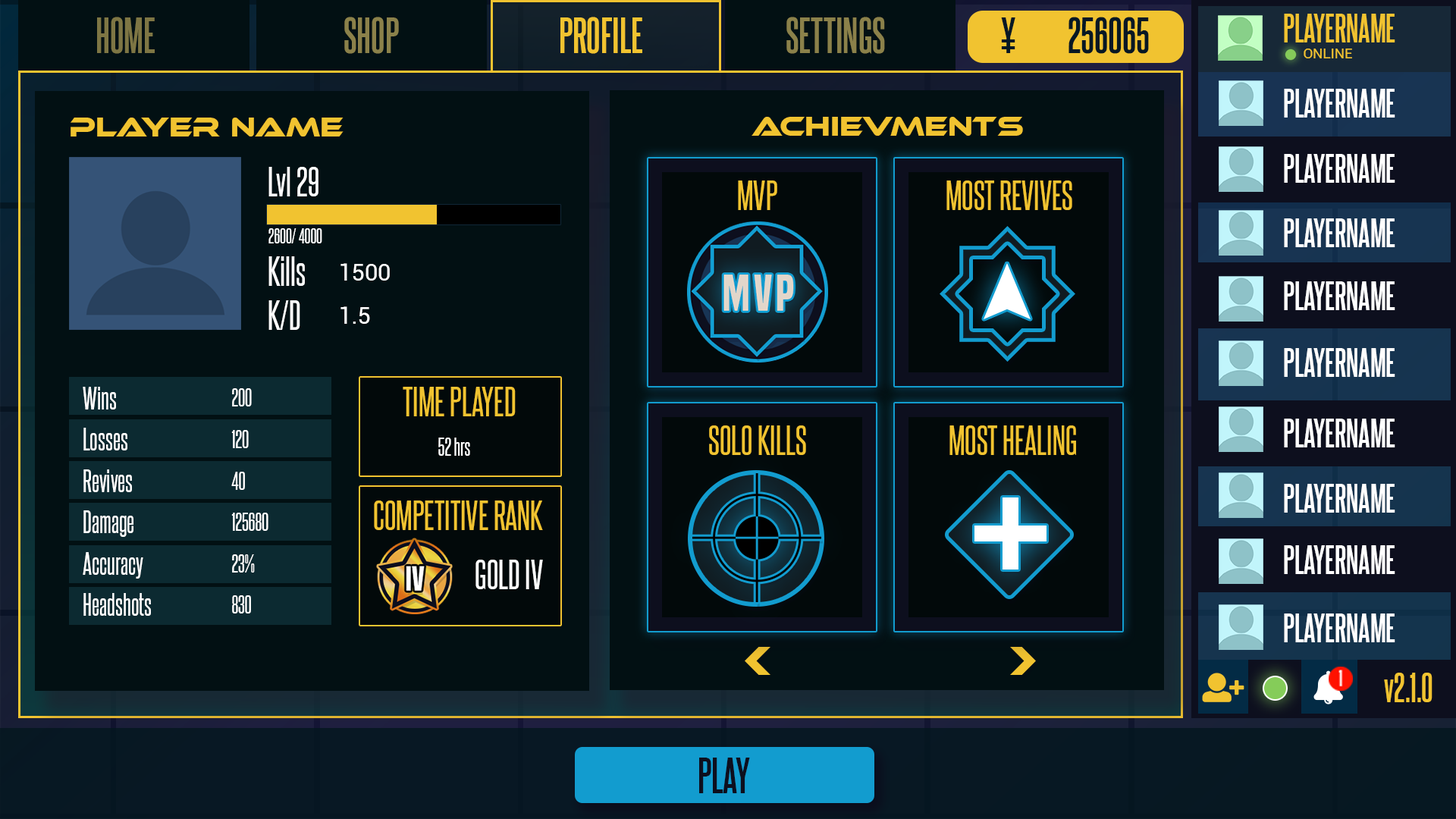
<style>
.page{position:relative;width:1456px;height:819px;background:#021013}
.page>*{position:absolute;margin:0}
.t1{font:43.2px "SteelfishRg-Bold";color:#7e7644}
.t2{font:43.2px "SteelfishRg-Bold";color:#8b814a}
.t3{font:43.2px "SteelfishRg-Bold";color:#f1c330}
.t4{font:43.2px "SteelfishRg-Bold";color:#071824}
.t5{font:34.5px "SteelfishRg-Bold";color:#f1c330}
.t6{font:14.1px "Roboto-Regular";color:#f1c330}
.t7{font:34.5px "SteelfishRg-Bold";color:#ffffff}
.t8{font:27.3px "EthnocentricRg-Regular";color:#f1c330}
.t9{font:36.4px "SteelfishRg-Regular";color:#ffffff}
.t10{font:36.4px "SteelfishRg-Regular";color:#f1c330}
.t11{font:18.2px "SteelfishRg-Regular";color:#ffffff}
.t12{font:23.2px "Roboto-Regular";color:#ffffff}
.t13{font:32.1px/41.4px "SteelfishRg-Regular"}
.t14{font:27.3px/41.4px "SteelfishRg-Regular";color:#ffffff}
.t15{font:21px/41.4px "SteelfishRg-Regular";color:#ffffff}
.t16{font:21px "SteelfishRg-Regular";color:#ffffff}
.t17{font:35.8px "SteelfishRg-Bold";color:#f1c330}
.t18{font:43.2px "SteelfishRg-Bold";color:#0d0f1e}
</style>
<div class="page">
<p class="t1" style="left:97px;top:17px;width:58px;height:37px">HOME</p>
<p class="t2" style="left:344px;top:17px;width:55px;height:37px">SHOP</p>
<p class="t3" style="left:560px;top:17px;width:82px;height:37px">PROFILE</p>
<p class="t2" style="left:786px;top:17px;width:99px;height:37px">SETTINGS</p>
<p class="t4" style="left:1001px;top:17px;width:14px;height:36px">¥</p>
<p class="t4" style="left:1068px;top:17px;width:81px;height:37px">256065</p>
<p class="t5" style="left:1284px;top:14px;width:111px;height:28px">PLAYERNAME</p>
<p class="t6" style="left:1304px;top:49px;width:48px;height:9px">ONLINE</p>
<p class="t7" style="left:1284px;top:89px;width:111px;height:29px">PLAYERNAME</p>
<p class="t8" style="left:71px;top:118px;width:273px;height:18px">Player Name</p>
<p class="t8" style="left:751px;top:117px;width:272px;height:19px">Achievments</p>
<p class="t7" style="left:1284px;top:154px;width:111px;height:29px">PLAYERNAME</p>
<p class="t9" style="left:268px;top:167px;width:50px;height:29px">Lvl 29</p>
<p class="t10" style="left:738px;top:180px;width:39px;height:30px">MVP</p>
<p class="t10" style="left:946px;top:180px;width:126px;height:30px">MOST REVIVES</p>
<p class="t7" style="left:1284px;top:218px;width:111px;height:29px">PLAYERNAME</p>
<p class="t11" style="left:268px;top:228px;width:54px;height:15px">2600/ 4000</p>
<p class="t9" style="left:268px;top:256px;width:37px;height:74px">Kills<br>K/D</p>
<p class="t12" style="left:340px;top:263px;width:50px;height:18px">1500</p>
<p class="t7" style="left:1284px;top:281px;width:111px;height:29px">PLAYERNAME</p>
<p class="t12" style="left:340px;top:306px;width:30px;height:18px">1.5</p>
<p class="t7" style="left:1284px;top:348px;width:111px;height:29px">PLAYERNAME</p>
<p class="t13" style="left:83px;top:383px;width:79px;height:233px">Wins<br>Losses<br>Revives<br>Damage <br>accuracy<br>headshots</p>
<p class="t14" style="left:83px;top:387px;width:68px;height:229px">Wins<br>Losses<br>Revives<br>Damage <br>Accuracy<br>Headshots</p>
<p class="t15" style="left:231px;top:388px;width:37px;height:225px">200<br>120<br>40<br>125680<br>23%<br>830</p>
<p class="t10" style="left:403px;top:387px;width:113px;height:29px">TIME PLAYED</p>
<p class="t10" style="left:709px;top:425px;width:97px;height:30px">SOLO KILLS</p>
<p class="t10" style="left:949px;top:425px;width:127px;height:30px">MOST HEALING</p>
<p class="t7" style="left:1284px;top:419px;width:111px;height:28px">PLAYERNAME</p>
<p class="t16" style="left:438px;top:438px;width:32px;height:18px">52 hrs</p>
<p class="t7" style="left:1284px;top:484px;width:111px;height:29px">PLAYERNAME</p>
<p class="t10" style="left:374px;top:500px;width:169px;height:30px">COMPETITIVE RANK</p>
<p class="t7" style="left:1284px;top:545px;width:111px;height:29px">PLAYERNAME</p>
<p class="t9" style="left:475px;top:560px;width:68px;height:29px">GOLD IV</p>
<p class="t7" style="left:1284px;top:613px;width:111px;height:29px">PLAYERNAME</p>
<p class="t17" style="left:1384px;top:673px;width:48px;height:29px">v2.1.0</p>
<p class="t18" style="left:699px;top:758px;width:51px;height:35px">PLAY</p>
</div>
